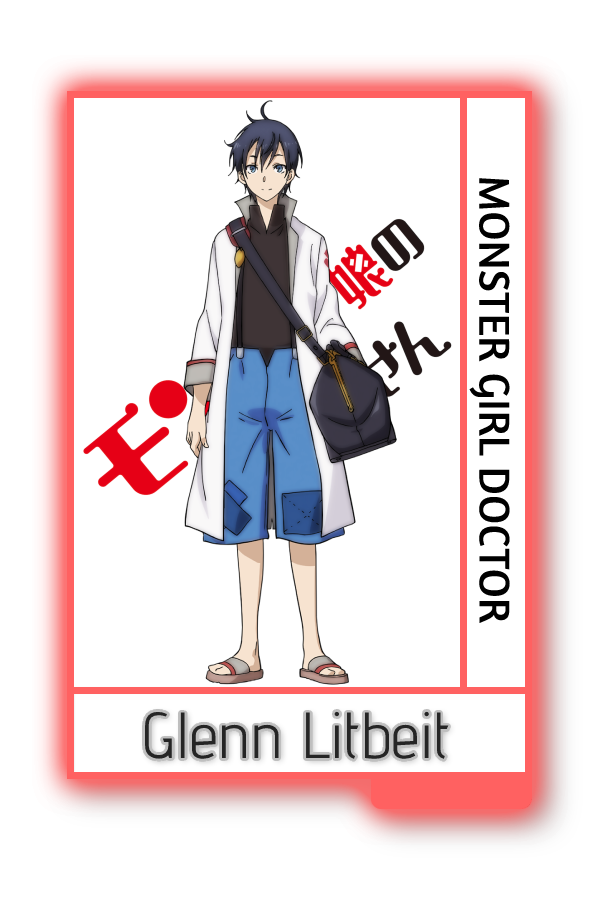
<style>
.page{position:relative;width:600px;height:900px;background:#ffffff}
.page>*{position:absolute;margin:0}
.t1{font:44px "Amaranth-Regular";color:#000000}
.t2{font:65px "AdventPro-Regular";color:#252525}
</style>
<div class="page">
<p class="t1" style="left:469px;top:178px;width:41px;height:446px;rotate:90deg">MONSTER GIRL DOCTOR</p>
<p class="t2" style="left:145px;top:711px;width:304px;height:48px">Glenn Litbeit</p>
</div>
